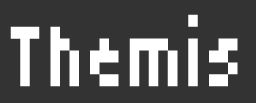
<style>
.page{position:relative;width:256px;height:103px;background:#333333}
.page>*{position:absolute;margin:0}
.t1{font:95.2px "Tiny5-Regular";letter-spacing:0.02em;color:#ffffff;scale:0.8 1}
</style>
<div class="page">
<p class="t1" style="left:10px;top:14px;width:228px;height:73px">Themis</p>
</div>
